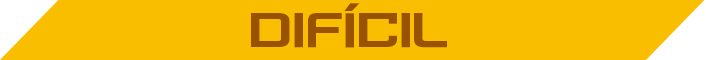
<style>
.page{position:relative;width:706px;height:60px;background:#fabe00}
.page>*{position:absolute;margin:0}
.t1{font:38.7px "KafuTechnoStd-U";color:#995300;scale:1.21 1}
</style>
<div class="page">
<p class="t1" style="left:251px;top:3px;width:196px;height:45px">DIFÍCIL</p>
</div>
